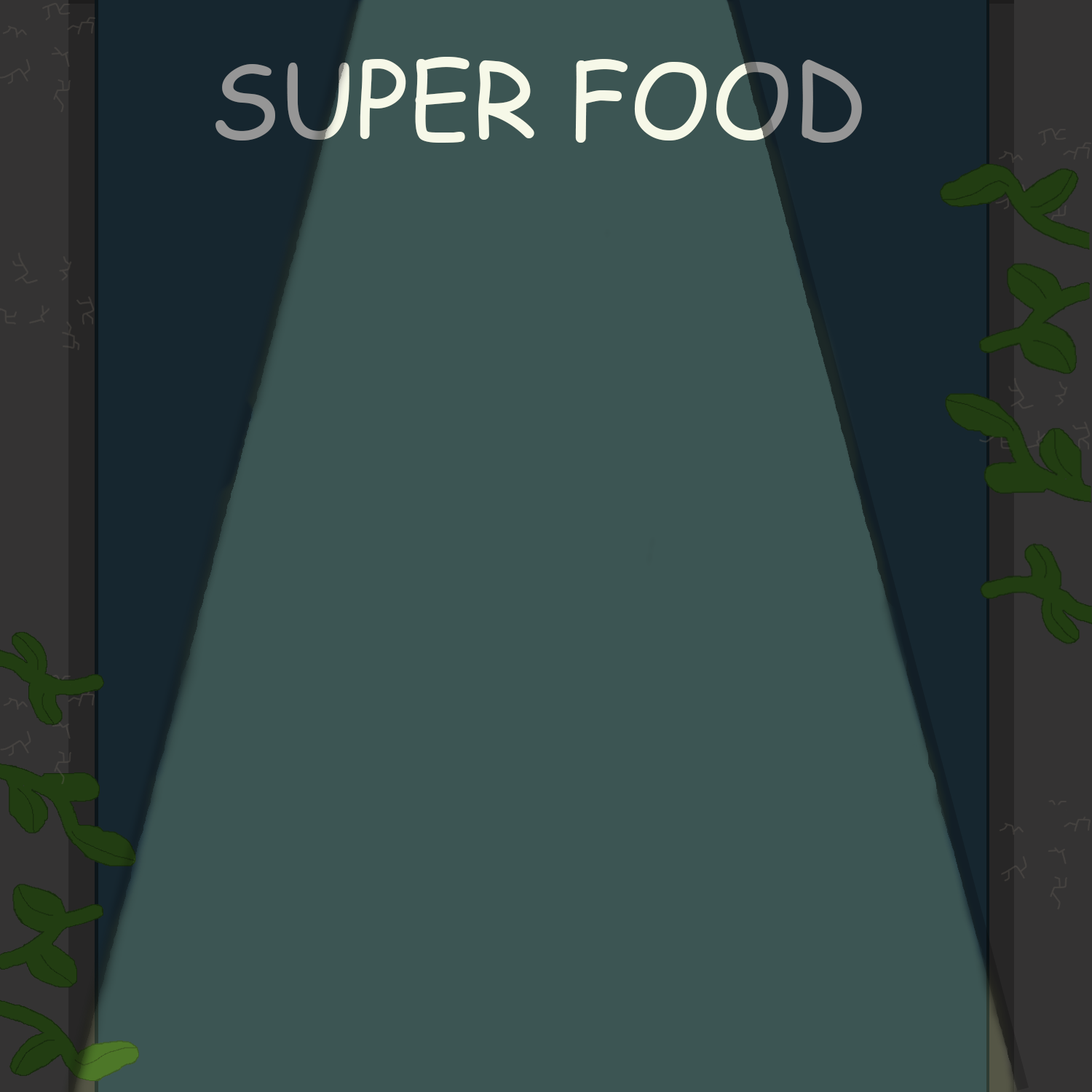
<style>
.page{position:relative;width:1092px;height:1092px;background:#3c5553}
.page>*{position:absolute;margin:0}
.t1{font:102.3px "ComicSansMS";color:#ffffff}
</style>
<div class="page">
<p class="t1" style="left:215px;top:57px;width:647px;height:86px">SUPER FOOD</p>
</div>
